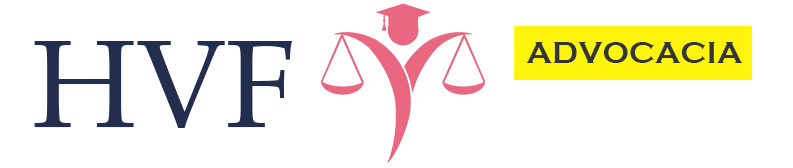
<style>
.page{position:relative;width:793px;height:168px;background:#ffffff}
.page>*{position:absolute;margin:0}
.t1{font:125px "BookAntiqua";color:#232e4e}
.t2{font:31.2px "CopperplateGothic-Bold";color:#353535}
</style>
<div class="page">
<p class="t1" style="left:34px;top:41px;width:258px;height:87px">HVF</p>
<p class="t2" style="left:526px;top:42px;width:217px;height:21px">ADVOCACIA</p>
</div>
